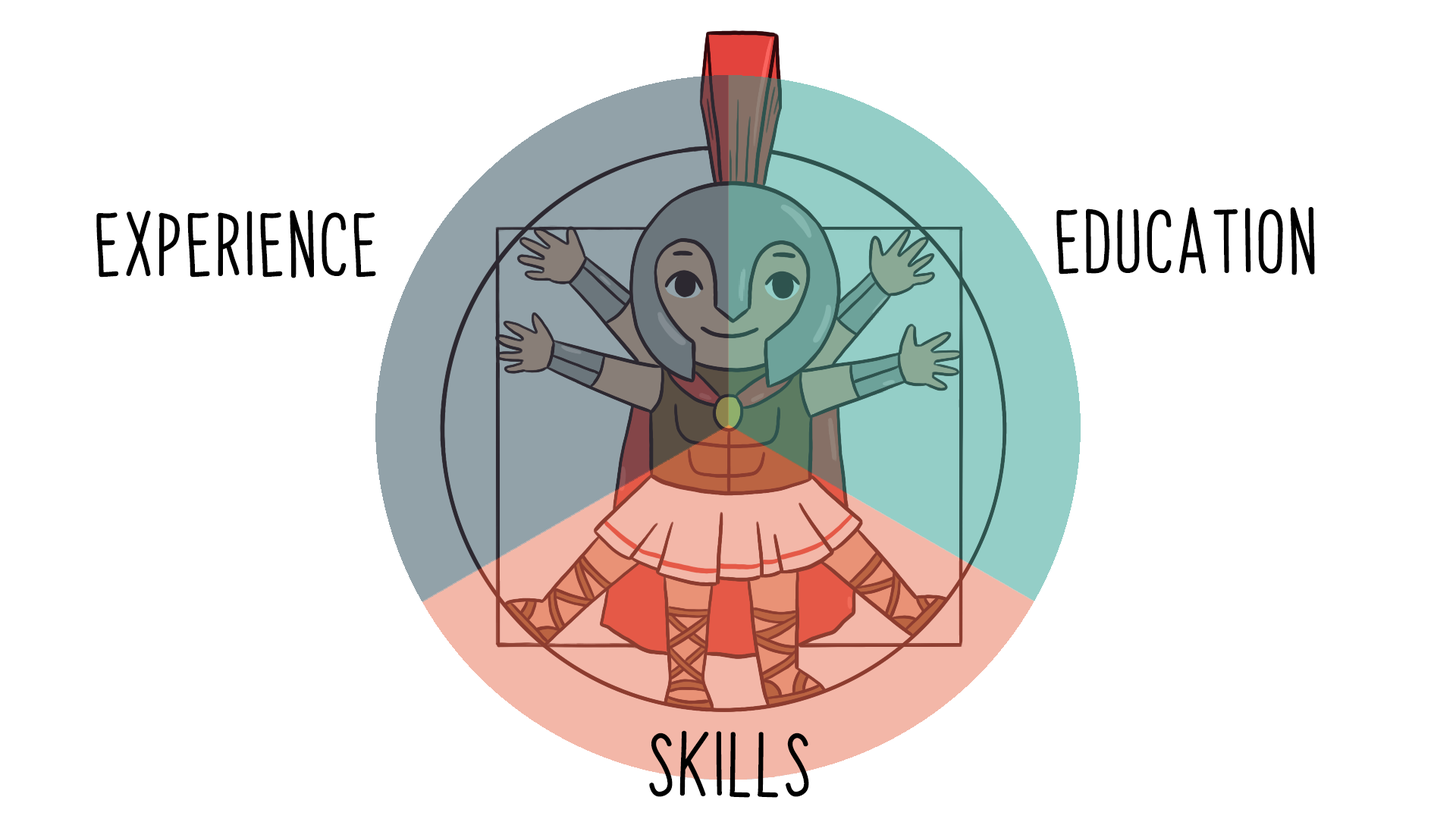
<style>
.page{position:relative;width:1456px;height:819px;background:#ffffff}
.page>*{position:absolute;margin:0}
.t1{font:54.6px "PapayaSunrise";color:#000000;font-weight:bold}
</style>
<div class="page">
<p class="t1" style="left:1056px;top:207px;width:259px;height:68px">education</p>
<p class="t1" style="left:96px;top:210px;width:280px;height:68px">experience</p>
<p class="t1" style="left:649px;top:730px;width:160px;height:68px">skills</p>
</div>
